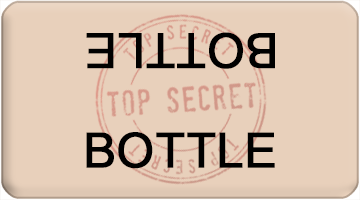
<style>
.page{position:relative;width:360px;height:200px;background:#e8d0bb}
.page>*{position:absolute;margin:0}
.t1{font:48px "ArialMT";color:#000000;font-weight:bold}
</style>
<div class="page">
<p class="t1" style="left:86px;top:32px;width:189px;height:37px;rotate:180deg">BOTTLE</p>
<p class="t1" style="left:86px;top:132px;width:189px;height:37px">BOTTLE</p>
</div>
